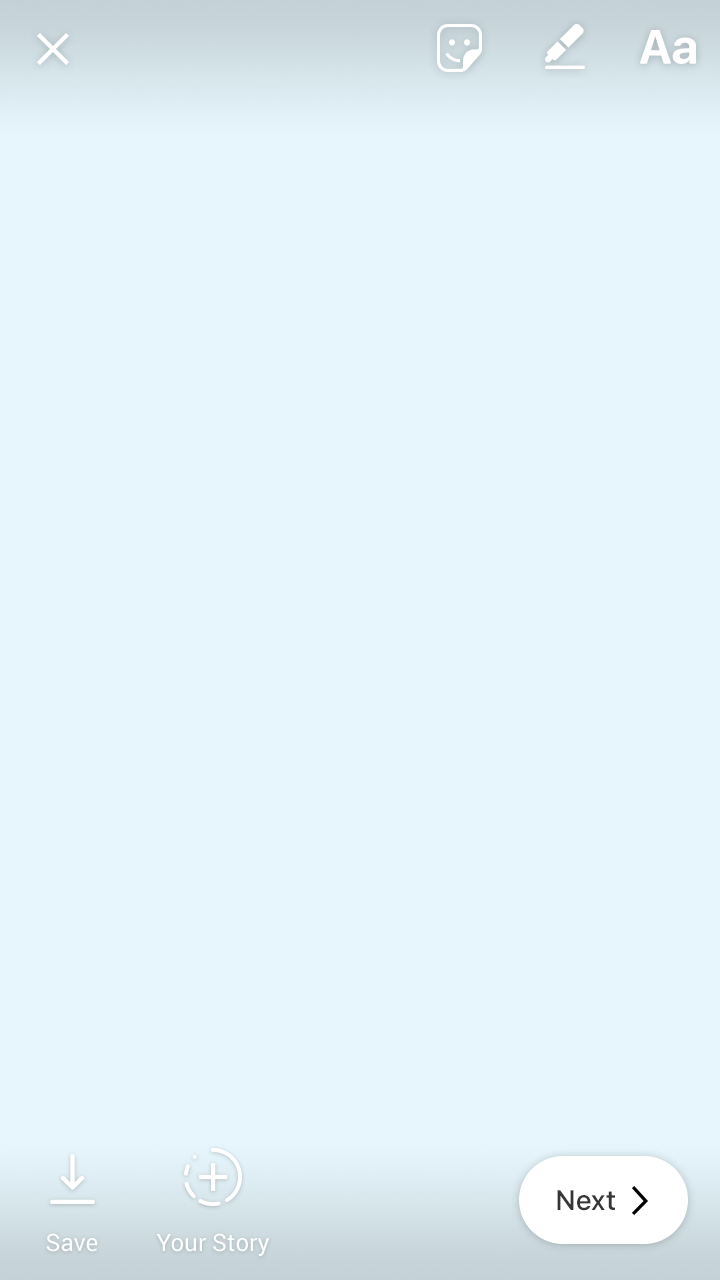
<style>
.page{position:relative;width:720px;height:1280px;background:#e6f6fc}
.page>*{position:absolute;margin:0}
.t1{font:28px "SFUIText-Medium";letter-spacing:-0.02em;color:#363636}
.t2{font:24px "Roboto-Regular";color:#ffffff}
</style>
<div class="page">
<p class="t1" style="left:557px;top:1190px;width:58px;height:21px">Next</p>
<p class="t2" style="left:46px;top:1233px;width:52px;height:19px">Save</p>
<p class="t2" style="left:156px;top:1233px;width:114px;height:23px">Your Story</p>
</div>
